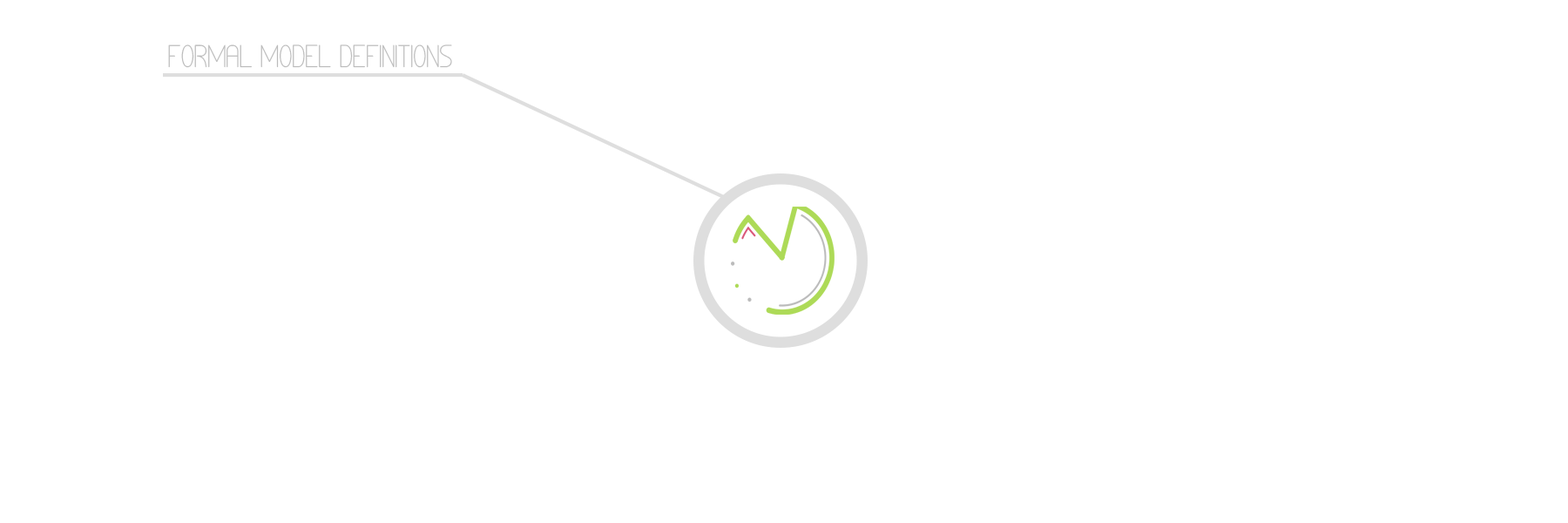
<style>
.page{position:relative;width:1568px;height:523px;background:#ffffff}
.page>*{position:absolute;margin:0}
.t1{font:21.8px "LinealSimplesSt";letter-spacing:-0.02em;color:#bbbbbb}
</style>
<div class="page">
<p class="t1" style="left:168px;top:44px;width:284px;height:24px">FORMAL MODEL DEFINITIONS</p>
</div>
